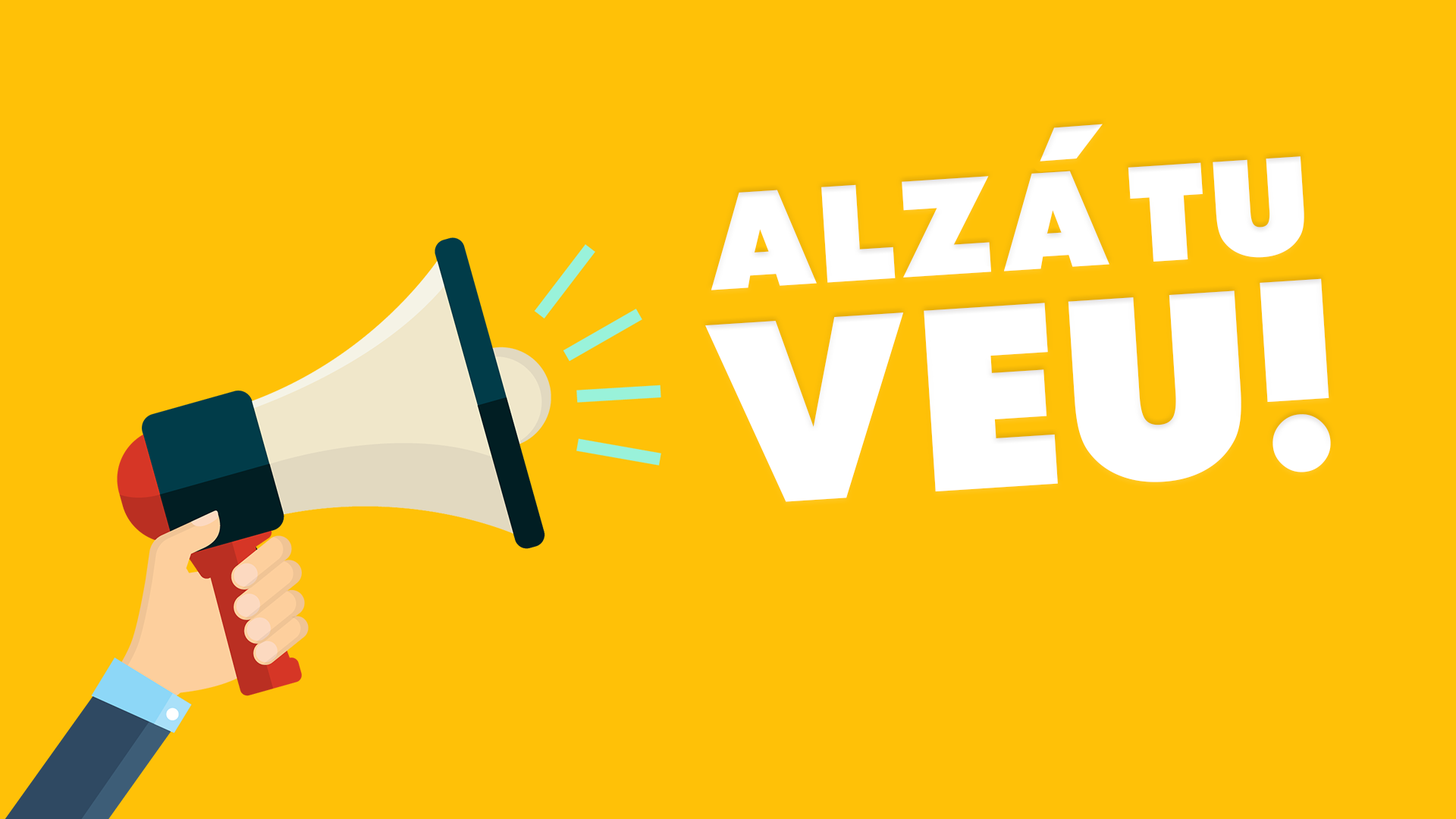
<style>
.page{position:relative;width:1456px;height:819px;background:#ffc107}
.page>*{position:absolute;margin:0}
.t1{font:188.2px "Raiderfont";color:#ffffff}
.t2{font:133.6px "Raiderfont";color:#ffffff}
.t3{font:253.3px "Raiderfont";color:#ffffff}
</style>
<div class="page">
<p class="t1" style="left:1040px;top:124px;width:63px;height:38px;rotate:176deg">´`</p>
<p class="t2" style="left:711px;top:156px;width:593px;height:134px;rotate:-4deg">ALZA TU</p>
<p class="t3" style="left:705px;top:278px;width:626px;height:224px;rotate:-4deg">VEU!</p>
</div>
